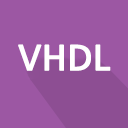
<style>
.page{position:relative;width:128px;height:128px;background:#9c57a3}
.page>*{position:absolute;margin:0}
.t1{font:36px "Humanist777BT-RomanB";color:#ffffff;font-weight:bold}
</style>
<div class="page">
<p class="t1" style="left:18px;top:44px;width:93px;height:27px">VHDL</p>
</div>
